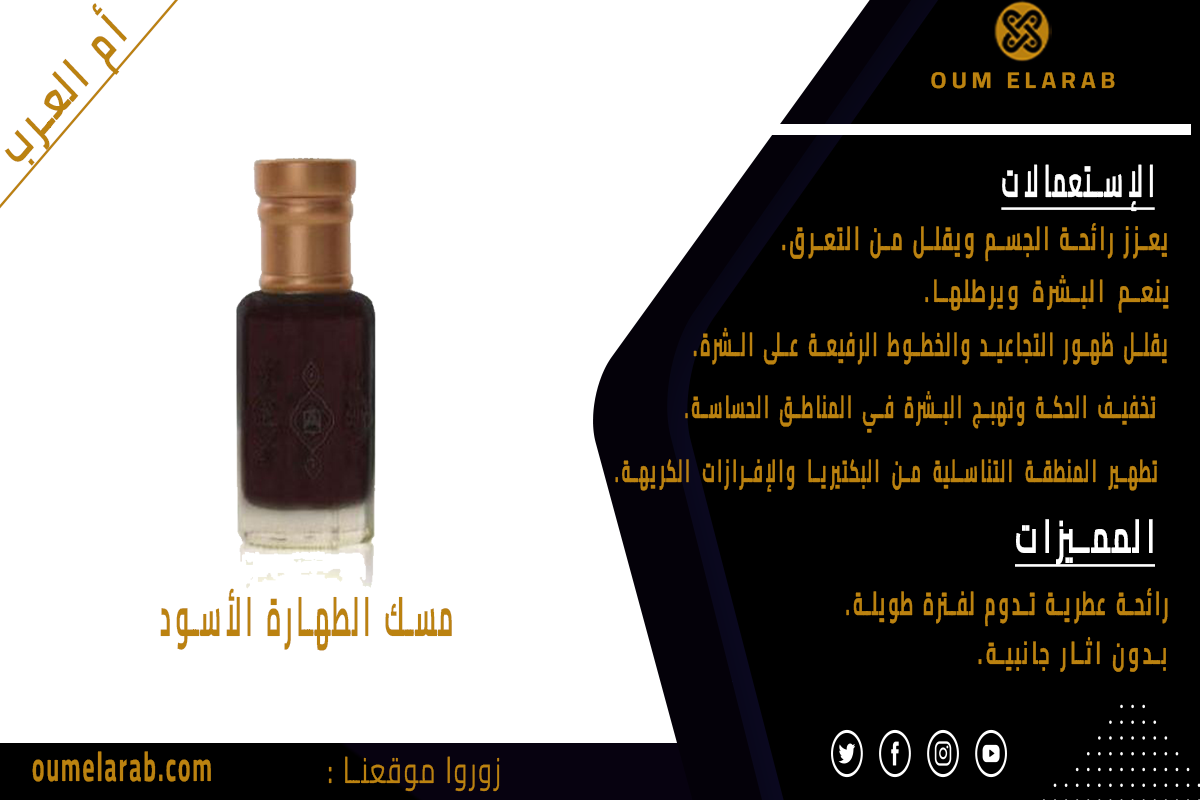
<style>
.page{position:relative;width:1200px;height:800px;background:#ffffff}
.page>*{position:absolute;margin:0}
.t1{font:22.8px "Cairo-Bold";letter-spacing:0.2em;color:#bb8210;font-weight:bold;font-style:italic;scale:1.05 1}
.t2{font:45.4px "Cairo-Bold";letter-spacing:0.2em;color:#fefefe;font-weight:bold;font-style:italic;text-decoration:underline;scale:0.45 1}
.t3{font:33.3px "Cairo-Bold";letter-spacing:0.2em;color:#bb8210;font-weight:bold;font-style:italic;scale:0.5 1}
.t4{font:31.7px "Cairo-Bold";letter-spacing:0.2em;color:#bb8210;font-weight:bold;font-style:italic;scale:0.57 1}
.t5{font:33.2px "Cairo-Bold";letter-spacing:0.2em;color:#bb8210;font-weight:bold;font-style:italic;scale:0.46 1}
.t6{font:31.7px "Cairo-Bold";letter-spacing:0.2em;color:#bb8210;font-weight:bold;font-style:italic;scale:0.46 1}
.t7{font:47.8px "Cairo-Bold";letter-spacing:0.2em;color:#ffffff;font-weight:bold;font-style:italic;text-decoration:underline;scale:0.56 1}
.t8{font:55px "Cairo-Bold";letter-spacing:0.2em;color:#bb8210;font-weight:bold;font-style:italic;scale:0.41 1}
.t9{font:33.2px "Cairo-Bold";letter-spacing:0.2em;color:#bb8210;font-weight:bold;font-style:italic;scale:0.49 1}
.t10{font:41.7px "Cairo-Bold";letter-spacing:0.1em;color:#bb8210;font-weight:bold;scale:0.55 1}
.t11{font:36.7px "Cairo-Regular";letter-spacing:0.1em;color:#bb8210;font-weight:bold;scale:0.65 1}
</style>
<div class="page">
<p class="t1" style="left:931px;top:72px;width:184px;height:17px">OUM ELARAB</p>
<p class="t2" style="left:1001px;top:164px;width:154px;height:48px">الإستعمالات</p>
<p class="t3" style="left:782px;top:223px;width:385px;height:39px">يعزز رائحة الجسم ويقلل من التعرق.</p>
<p class="t4" style="left:925px;top:275px;width:244px;height:38px">ينعم البشرة ويرطلها.</p>
<p class="t5" style="left:693px;top:327px;width:474px;height:38px">يقلل ظهور التجاعيد والخطوط الرفيعة على الشرة.</p>
<p class="t6" style="left:685px;top:391px;width:471px;height:42px">تخفيف الحكة وتهبج البشرة في المناطق الحساسة.</p>
<p class="t6" style="left:615px;top:459px;width:542px;height:33px">تطهير المنطقة التناسلية من البكتيريا والإفرازات الكريهة.</p>
<p class="t7" style="left:1015px;top:519px;width:140px;height:48px">المميزات</p>
<p class="t8" style="left:160px;top:588px;width:292px;height:63px">مسك الطهارة الأسود</p>
<p class="t9" style="left:846px;top:588px;width:322px;height:39px">رائحة عطرية تدوم لفترة طويلة.</p>
<p class="t4" style="left:978px;top:637px;width:188px;height:35px">بدون اثار جانبية.</p>
<p class="t10" style="left:32px;top:751px;width:179px;height:31px">oumelarab.com</p>
<p class="t11" style="left:328px;top:756px;width:172px;height:36px">زوروا موقعنا :</p>
</div>
